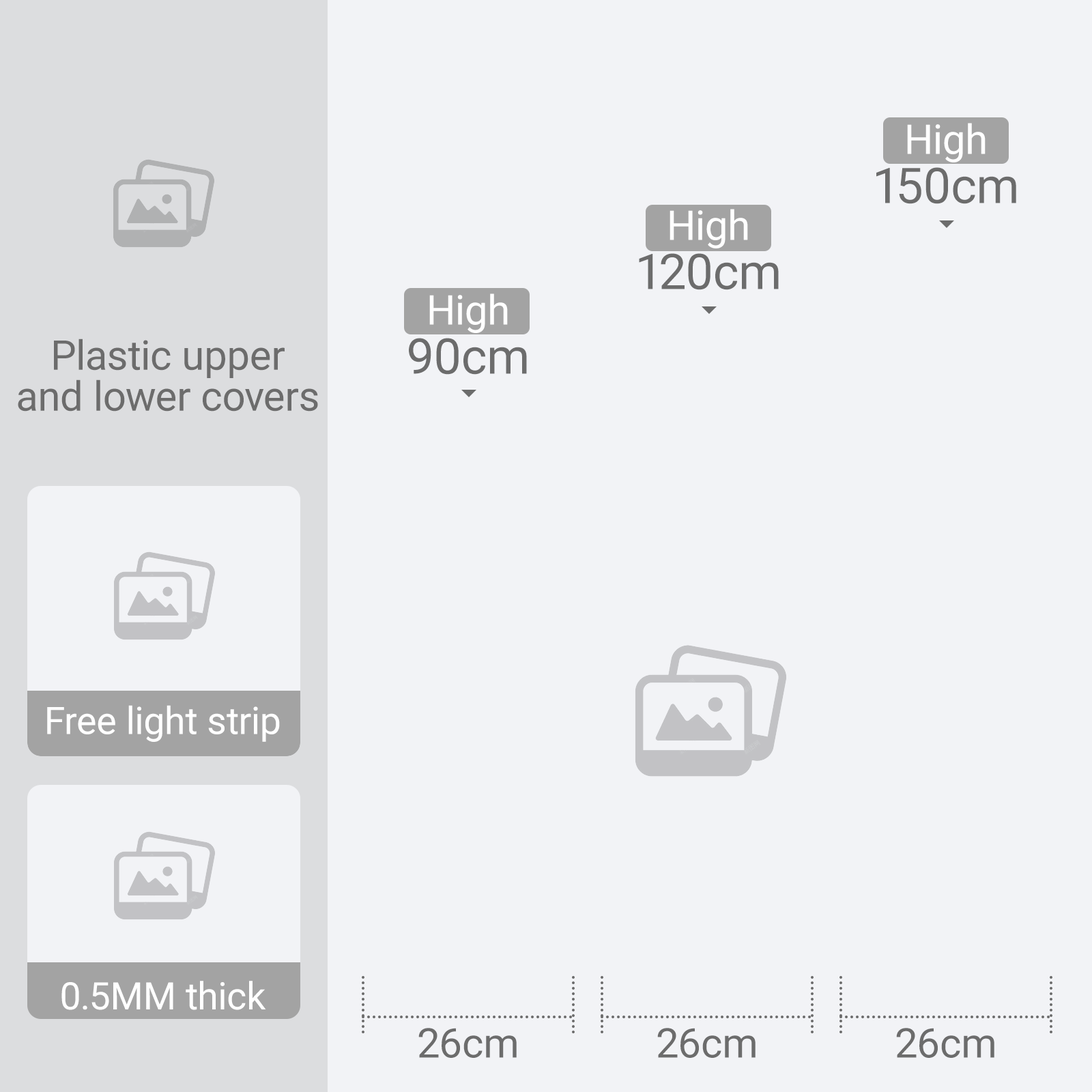
<style>
.page{position:relative;width:1092px;height:1092px;background:#f2f3f6}
.page>*{position:absolute;margin:0}
.t1{font:49.1px/49.1px "Roboto-Regular";color:#6c6c6c}
.t2{font:40.9px/49.1px "Roboto-Regular";color:#ffffff}
.t3{font:40.9px/40.9px "Roboto-Regular";color:#6c6c6c}
.t4{font:37.9px "Roboto-Regular";color:#ffffff}
.t5{font:40.9px "Roboto-Regular";color:#6c6c6c}
</style>
<div class="page">
<p class="t1" style="left:876px;top:123px;width:140px;height:81px;text-align:center"><span class="t2">High<br></span>150cm</p>
<p class="t3" style="left:18px;top:339px;width:300px;height:73px;text-align:center">Plastic upper<br>and lower covers</p>
<p class="t4" style="left:47px;top:705px;width:233px;height:37px">Free light strip</p>
<p class="t4" style="left:61px;top:981px;width:205px;height:29px">0.5MM thick</p>
<p class="t5" style="left:418px;top:1028px;width:99px;height:30px">26cm</p>
<p class="t5" style="left:657px;top:1028px;width:99px;height:30px">26cm</p>
<p class="t5" style="left:896px;top:1028px;width:98px;height:30px">26cm</p>
</div>
